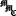
<style>
.page{position:relative;width:16px;height:16px;background:#ffffff}
.page>*{position:absolute;margin:0}
.t1{font:8px "OldEnglishTextMT";color:#000000}
</style>
<div class="page">
<p class="t1" style="left:0px;top:0px;width:8px;height:7px">M</p>
<p class="t1" style="left:4px;top:4px;width:9px;height:8px">M</p>
<p class="t1" style="left:10px;top:10px;width:7px;height:6px">C</p>
</div>
